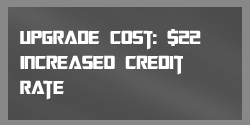
<style>
.page{position:relative;width:250px;height:125px}
.page>*{position:absolute;margin:0}
.t1{font:21px "TransformersMovie";color:#ffffff}
.t2{font:21px "TransformersMovie";letter-spacing:-0.08em;color:#ffffff}
.t3{font:21px "TransformersMovie";letter-spacing:0.04em;color:#ffffff}
</style>
<div class="page">
<p class="t1" style="left:20px;top:29px;width:181px;height:71px">upgrade cost: $22<br>Increased credit<br>r<span class="t2">a</span><span class="t3">t</span>e</p>
</div>
